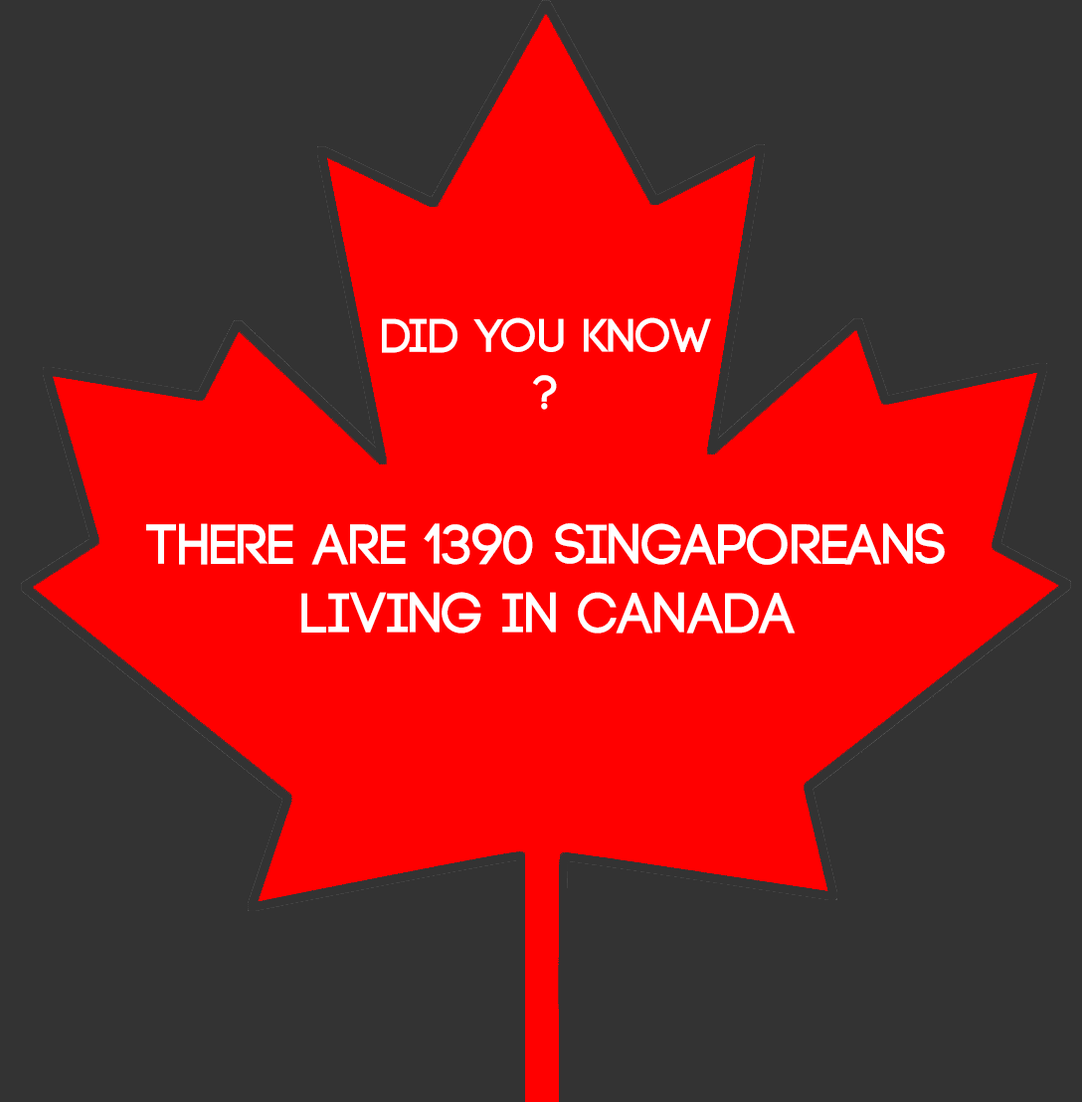
<style>
.page{position:relative;width:1082px;height:1102px;background:#333333}
.page>*{position:absolute;margin:0}
.t1{font:47.7px "Code-Bold";color:#ffffff}
.t2{font:57.2px "Code-Bold";color:#ffffff}
</style>
<div class="page">
<p class="t1" style="left:382px;top:317px;width:329px;height:93px;text-align:center">DID YOU KNOW<br>?</p>
<p class="t2" style="left:146px;top:523px;width:799px;height:111px;text-align:center">There are 1390 Singaporeans<br>living in Canada</p>
</div>
